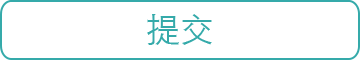
<style>
.page{position:relative;width:360px;height:60px;background:#ffffff}
.page>*{position:absolute;margin:0}
.t1{font:34px "STHeitiSC-Light";color:#35aaaa;text-transform:uppercase}
</style>
<div class="page">
<p class="t1" style="left:147px;top:14px;width:65px;height:31px">提交</p>
</div>
